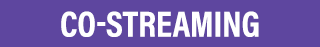
<style>
.page{position:relative;width:320px;height:47px;background:#5e469f}
.page>*{position:absolute;margin:0}
.t1{font:36.3px "AcuminProCond-Bold";color:#ffffff;text-transform:uppercase}
</style>
<div class="page">
<p class="t1" style="left:61px;top:11px;width:198px;height:26px">Co-streaming</p>
</div>
